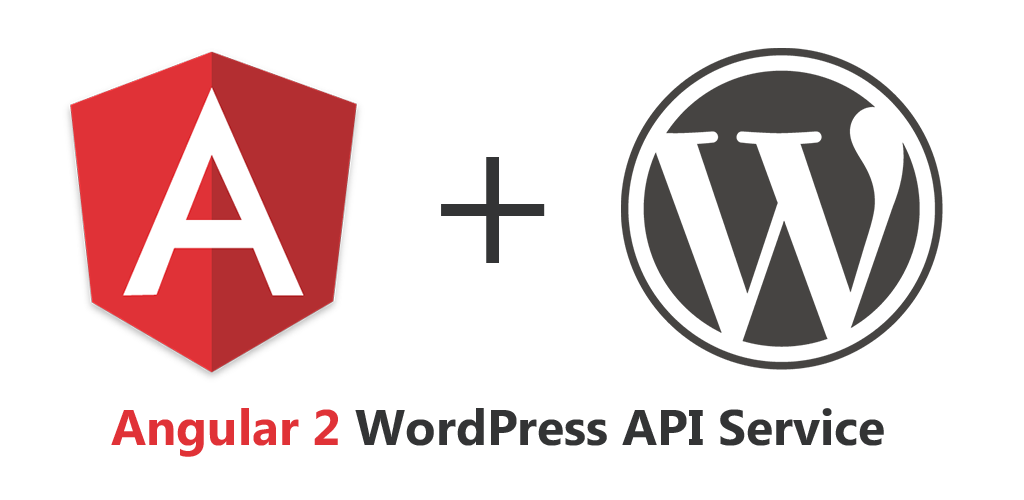
<style>
.page{position:relative;width:1024px;height:500px;background:#ffffff}
.page>*{position:absolute;margin:0}
.t1{font:50px "MicrosoftPhagsPa-Bold";color:#333435}
.t2{font:50px "MicrosoftPhagsPa-Bold";color:#e03237}
</style>
<div class="page">
<p class="t1" style="left:111px;top:408px;width:773px;height:49px"><span class="t2">Angular 2</span> WordPress API Service</p>
</div>
